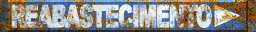
<style>
.page{position:relative;width:256px;height:32px}
.page>*{position:absolute;margin:0}
.t1{font:30.7px "Arial-Black";letter-spacing:-0.08em;text-transform:uppercase;font-weight:bold;scale:0.63 1}
</style>
<div class="page">
<p class="t1" style="left:11px;top:4px;width:201px;height:24px">REABASTECIMENTO</p>
</div>
